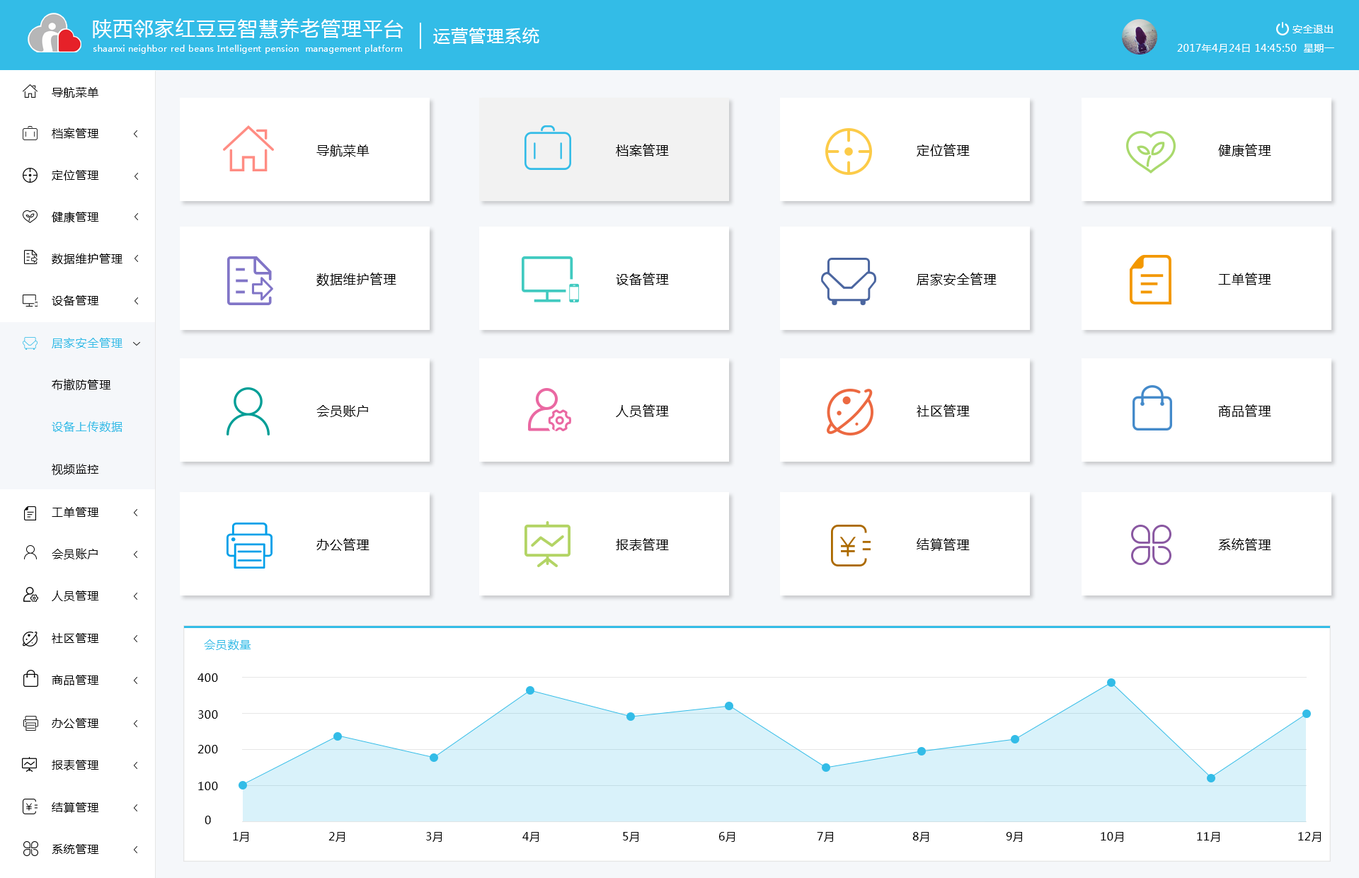
<style>
.page{position:relative;width:1359px;height:878px;background:#ffffff}
.page>*{position:absolute;margin:0}
.t1{font:19.8px "MicrosoftYaHei";letter-spacing:0.05em;color:#ffffff}
.t2{font:17px "MicrosoftYaHei";letter-spacing:0.05em;color:#ffffff}
.t3{font:9.9px "MicrosoftYaHei";letter-spacing:0.05em;color:#ffffff}
.t4{font:8.1px "MicrosoftYaHei";letter-spacing:0.05em;color:#ffffff}
.t5{font:11.3px "MicrosoftYaHei";letter-spacing:0.05em;color:#000000}
.t6{font:12.7px "MicrosoftYaHei";letter-spacing:0.05em;color:#000000}
.t7{font:11.3px "MicrosoftYaHei";letter-spacing:0.05em;color:#030303}
.t8{font:11.3px "MicrosoftYaHei";letter-spacing:0.05em;color:#33bce7}
.t9{font:11.3px "MicrosoftYaHei";letter-spacing:0.05em;color:#010101}
</style>
<div class="page">
<p class="t1" style="left:93px;top:18px;width:310px;height:20px">陕西邻家红豆豆智慧养老管理平台</p>
<p class="t2" style="left:433px;top:28px;width:106px;height:16px">运营管理系统</p>
<p class="t3" style="left:1292px;top:25px;width:41px;height:8px">安全退出</p>
<p class="t4" style="left:93px;top:45px;width:309px;height:9px">shaanxi neighbor red beans Intelligent pension  management platform</p>
<p class="t3" style="left:1177px;top:44px;width:157px;height:8px">2017年4月24日 14:45:50  星期一</p>
<p class="t5" style="left:52px;top:87px;width:46px;height:11px">导航菜单</p>
<p class="t5" style="left:52px;top:127px;width:47px;height:12px">档案管理</p>
<p class="t6" style="left:316px;top:144px;width:53px;height:13px">导航菜单</p>
<p class="t6" style="left:616px;top:144px;width:53px;height:12px">档案管理</p>
<p class="t6" style="left:916px;top:144px;width:54px;height:12px">定位管理</p>
<p class="t6" style="left:1218px;top:144px;width:53px;height:12px">健康管理</p>
<p class="t7" style="left:52px;top:170px;width:47px;height:10px">定位管理</p>
<p class="t5" style="left:52px;top:212px;width:47px;height:10px">健康管理</p>
<p class="t5" style="left:52px;top:253px;width:70px;height:11px">数据维护管理</p>
<p class="t6" style="left:316px;top:272px;width:80px;height:14px">数据维护管理</p>
<p class="t6" style="left:616px;top:272px;width:53px;height:13px">设备管理</p>
<p class="t6" style="left:916px;top:272px;width:80px;height:13px">居家安全管理</p>
<p class="t6" style="left:1218px;top:272px;width:53px;height:13px">工单管理</p>
<p class="t5" style="left:52px;top:295px;width:47px;height:11px">设备管理</p>
<p class="t8" style="left:52px;top:338px;width:70px;height:10px">居家安全管理</p>
<p class="t5" style="left:52px;top:379px;width:59px;height:11px">布撤防管理</p>
<p class="t6" style="left:316px;top:405px;width:52px;height:12px">会员账户</p>
<p class="t6" style="left:616px;top:404px;width:53px;height:13px">人员管理</p>
<p class="t6" style="left:916px;top:404px;width:54px;height:13px">社区管理</p>
<p class="t6" style="left:1218px;top:404px;width:53px;height:13px">商品管理</p>
<p class="t8" style="left:52px;top:421px;width:70px;height:11px">设备上传数据</p>
<p class="t5" style="left:52px;top:464px;width:46px;height:11px">视频监控</p>
<p class="t5" style="left:52px;top:507px;width:47px;height:10px">工单管理</p>
<p class="t6" style="left:316px;top:538px;width:53px;height:13px">办公管理</p>
<p class="t6" style="left:616px;top:538px;width:53px;height:13px">报表管理</p>
<p class="t6" style="left:916px;top:538px;width:54px;height:13px">结算管理</p>
<p class="t6" style="left:1218px;top:538px;width:53px;height:13px">系统管理</p>
<p class="t5" style="left:52px;top:548px;width:46px;height:11px">会员账户</p>
<p class="t5" style="left:52px;top:590px;width:47px;height:11px">人员管理</p>
<p class="t5" style="left:52px;top:633px;width:47px;height:10px">社区管理</p>
<p class="t8" style="left:204px;top:639px;width:47px;height:11px">会员数量</p>
<p class="t5" style="left:52px;top:674px;width:47px;height:11px">商品管理</p>
<p class="t5" style="left:197px;top:673px;width:21px;height:9px">400</p>
<p class="t5" style="left:198px;top:710px;width:20px;height:8px">300</p>
<p class="t5" style="left:52px;top:718px;width:47px;height:10px">办公管理</p>
<p class="t5" style="left:197px;top:745px;width:21px;height:8px">200</p>
<p class="t5" style="left:52px;top:759px;width:47px;height:11px">报表管理</p>
<p class="t5" style="left:198px;top:781px;width:20px;height:9px">100</p>
<p class="t5" style="left:52px;top:802px;width:47px;height:10px">结算管理</p>
<p class="t5" style="left:205px;top:815px;width:6px;height:9px">0</p>
<p class="t9" style="left:233px;top:832px;width:15px;height:9px">1月</p>
<p class="t9" style="left:328px;top:832px;width:17px;height:9px">2月</p>
<p class="t9" style="left:426px;top:832px;width:16px;height:9px">3月</p>
<p class="t9" style="left:522px;top:832px;width:17px;height:9px">4月</p>
<p class="t9" style="left:623px;top:832px;width:15px;height:9px">5月</p>
<p class="t9" style="left:719px;top:832px;width:16px;height:9px">6月</p>
<p class="t9" style="left:817px;top:832px;width:16px;height:9px">7月</p>
<p class="t9" style="left:912px;top:832px;width:17px;height:9px">8月</p>
<p class="t9" style="left:1006px;top:832px;width:16px;height:9px">9月</p>
<p class="t9" style="left:1100px;top:832px;width:23px;height:9px">10月</p>
<p class="t9" style="left:1197px;top:832px;width:22px;height:9px">11月</p>
<p class="t9" style="left:1298px;top:832px;width:23px;height:9px">12月</p>
<p class="t5" style="left:52px;top:844px;width:47px;height:9px">系统管理</p>
</div>
